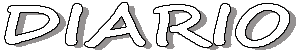
<style>
.page{position:relative;width:300px;height:50px;background:#ffffff}
.page>*{position:absolute;margin:0}
.t1{font:57px "SegoeScript-Bold";color:#ffffff;scale:1.3 1}
.t2{font:57px "SegoeScript-Bold";scale:1.3 1}
</style>
<div class="page">
<p class="t1" style="left:5px;top:3px;width:284px;height:44px">DIARIO</p>
<p class="t2" style="left:12px;top:6px;width:284px;height:44px">DIARIO</p>
</div>
